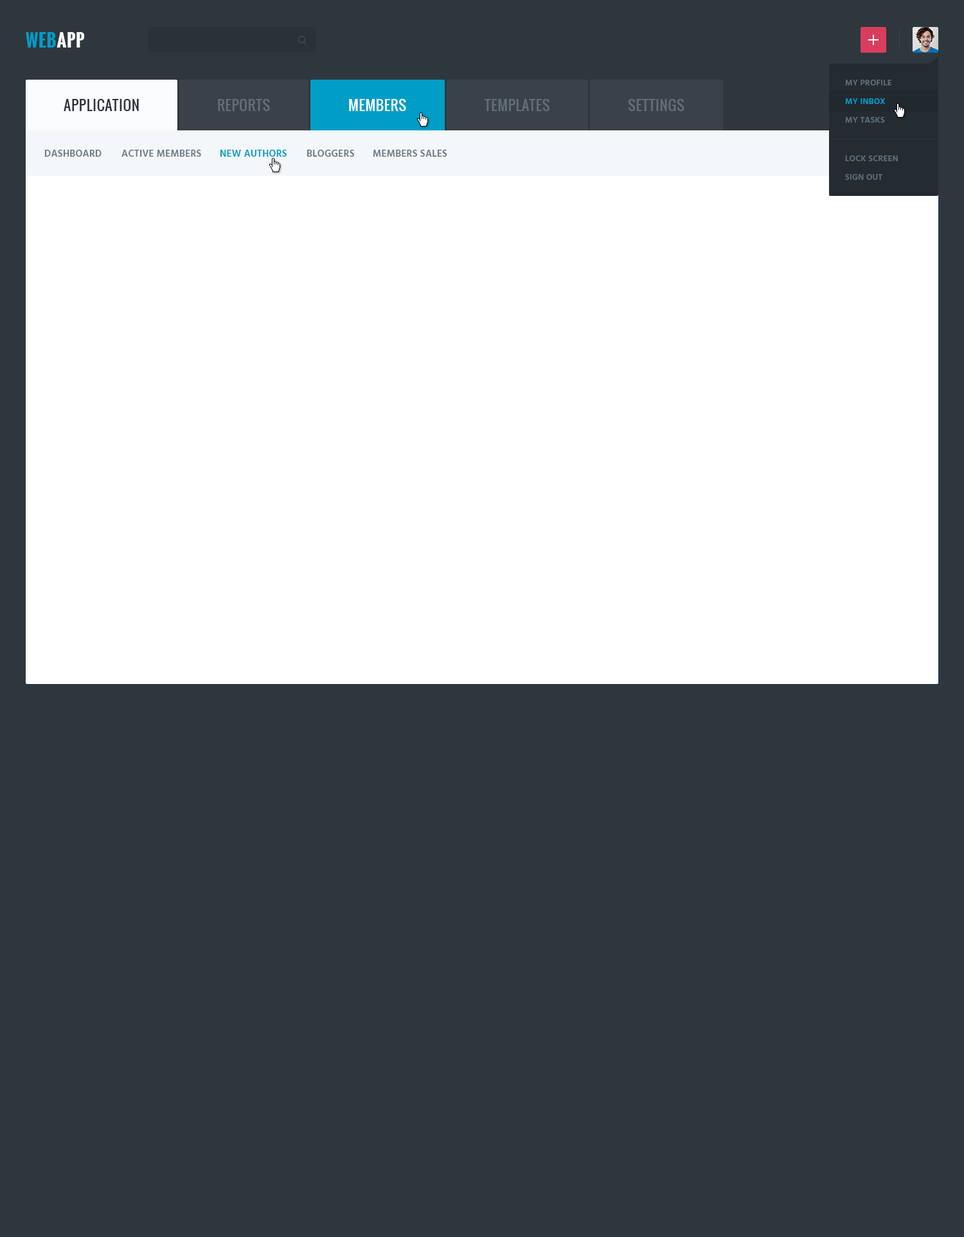
<style>
.page{position:relative;width:964px;height:1237px;background:#2f373e}
.page>*{position:absolute;margin:0}
.t1{font:17.3px "Oswald-Bold";letter-spacing:0.03em;color:#009dc7;text-transform:uppercase}
.t2{font:17.3px "Oswald-Bold";letter-spacing:0.03em;color:#ffffff;text-transform:uppercase}
.t3{font:8.4px "Hind-Semibold";letter-spacing:0.02em;color:#606e7a;text-transform:uppercase}
.t4{font:14.1px "Oswald-Regular";letter-spacing:0.03em;color:#2a3239;text-transform:uppercase}
.t5{font:14.1px "Oswald-Regular";letter-spacing:0.03em;color:#636e77;text-transform:uppercase}
.t6{font:14.1px "Oswald-Regular";letter-spacing:0.03em;color:#ffffff;text-transform:uppercase}
.t7{font:8.4px "Hind-Semibold";letter-spacing:0.02em;color:#009dc7;text-transform:uppercase}
.t8{font:9.6px "Hind-Semibold";letter-spacing:0.02em;color:#6c7b88;text-transform:uppercase}
.t9{font:9.6px "Hind-Semibold";letter-spacing:0.02em;color:#009dc7;text-transform:uppercase}
</style>
<div class="page">
<p class="t1" style="left:26px;top:32px;width:59px;height:16px">Web<span class="t2">App</span></p>
<p class="t3" style="left:845px;top:80px;width:46px;height:5px">MY PROFILE</p>
<p class="t4" style="left:64px;top:99px;width:75px;height:12px">APPLICATION</p>
<p class="t5" style="left:218px;top:99px;width:52px;height:12px">REPORTS</p>
<p class="t6" style="left:349px;top:99px;width:57px;height:12px">MEMBERS</p>
<p class="t5" style="left:484px;top:99px;width:65px;height:12px">TEMPLATES</p>
<p class="t5" style="left:628px;top:99px;width:56px;height:12px">SETTINGS</p>
<p class="t7" style="left:845px;top:98px;width:40px;height:6px">MY INBOX</p>
<p class="t3" style="left:845px;top:117px;width:40px;height:6px">MY TASKS</p>
<p class="t8" style="left:44px;top:150px;width:58px;height:7px">DASHBOARD</p>
<p class="t8" style="left:121px;top:150px;width:80px;height:7px">ACTIVE MEMBERS</p>
<p class="t9" style="left:220px;top:150px;width:67px;height:7px">NEW AUTHORS</p>
<p class="t8" style="left:306px;top:150px;width:48px;height:7px">BLOGGERS</p>
<p class="t8" style="left:373px;top:150px;width:74px;height:7px">MEMBERS SALES</p>
<p class="t3" style="left:845px;top:155px;width:53px;height:6px">LOCK SCREEN</p>
<p class="t3" style="left:845px;top:174px;width:37px;height:6px">SIGN OUT</p>
</div>
